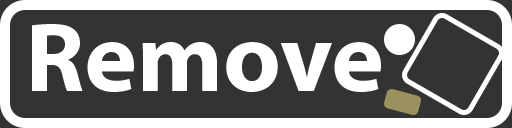
<style>
.page{position:relative;width:512px;height:128px;background:#333333}
.page>*{position:absolute;margin:0}
.t1{font:100px "MyriadPro-Bold";color:#ffffff}
</style>
<div class="page">
<p class="t1" style="left:32px;top:24px;width:349px;height:68px">Remove</p>
</div>
